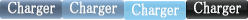
<style>
.page{position:relative;width:248px;height:20px}
.page>*{position:absolute;margin:0}
.t1{font:16.1px "MS-PMincho";color:#ffffff;font-weight:bold;scale:0.84 1}
</style>
<div class="page">
<p class="t1" style="left:8px;top:1px;width:47px;height:15px">Charger</p>
<p class="t1" style="left:70px;top:1px;width:47px;height:15px">Charger</p>
<p class="t1" style="left:132px;top:3px;width:47px;height:15px">Charger</p>
<p class="t1" style="left:194px;top:1px;width:47px;height:15px">Charger</p>
</div>
